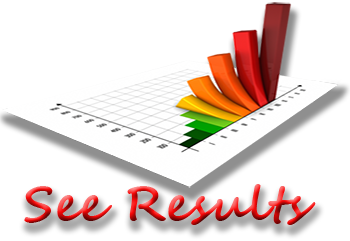
<style>
.page{position:relative;width:350px;height:241px;background:#ffffff}
.page>*{position:absolute;margin:0}
.t1{font:48px "SegoeScript-Bold"}
</style>
<div class="page">
<p class="t1" style="left:24px;top:184px;width:292px;height:41px">See Results</p>
</div>
